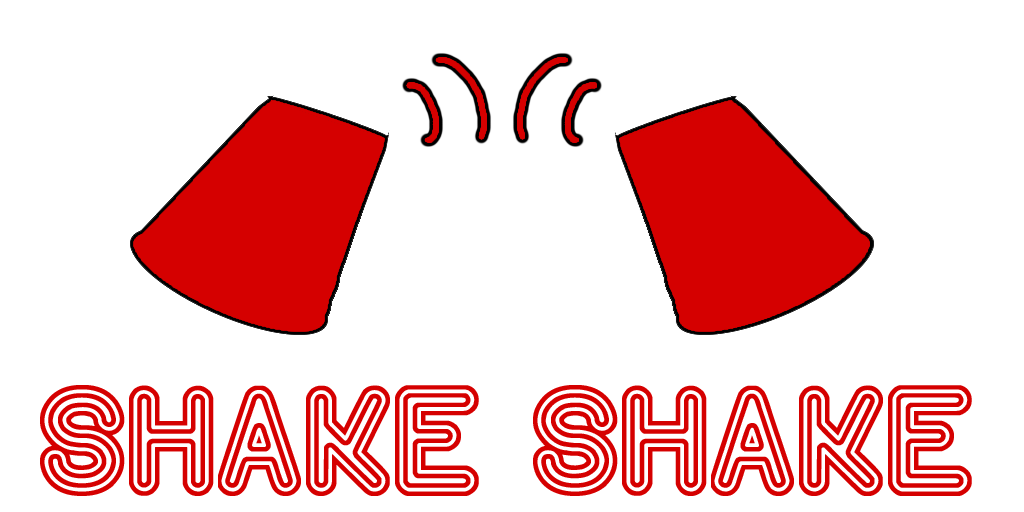
<style>
.page{position:relative;width:1024px;height:512px;background:#ffffff}
.page>*{position:absolute;margin:0}
.t1{font:91.7px "DiscotequeSt";color:#d50000}
</style>
<div class="page">
<p class="t1" style="left:40px;top:385px;width:439px;height:111px">SHAKE</p>
<p class="t1" style="left:533px;top:385px;width:439px;height:111px">SHAKE</p>
</div>
